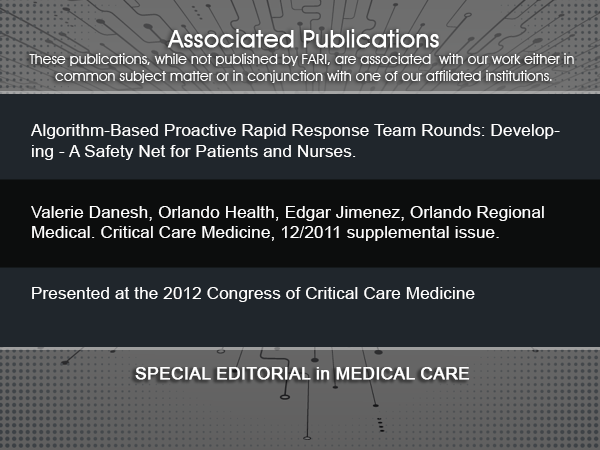
<style>
.page{position:relative;width:600px;height:450px;background:#20262c}
.page>*{position:absolute;margin:0}
.t1{font:14px "AvantGardeITCbyBT-Book";letter-spacing:0.01em;color:#ffffff}
.t2{font:24px "AvantGardeITCbyBT-Book";letter-spacing:0.01em;color:#ffffff;font-weight:bold}
.t3{font:17px "ArialMT";letter-spacing:0.01em;color:#ffffff}
.t4{font:17px "ArialMT";letter-spacing:0.01em;color:#ffffff;font-weight:bold}
</style>
<div class="page">
<p class="t1" style="left:29px;top:29px;width:545px;height:54px;text-align:center"><span class="t2">Associated Publications<br></span>These publications, while not published by FARI, are associated  with our work either in <br>common subject matter or in conjunction with one of our affiliated institutions.</p>
<p class="t3" style="left:31px;top:124px;width:529px;height:178px">Algorithm-Based Proactive Rapid Response Team Rounds: Developing - A Safety Net for Patients and Nurses.<br><br><br>Valerie Danesh, Orlando Health, Edgar Jimenez, Orlando Regional Medical. Critical Care Medicine, 12/2011 supplemental issue. <br><br><br>Presented at the 2012 Congress of Critical Care Medicine</p>
<p class="t4" style="left:135px;top:367px;width:335px;height:13px">SPECIAL EDITORIAL in MEDICAL CARE</p>
</div>
